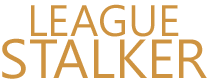
<style>
.page{position:relative;width:208px;height:84px;background:#ffffff}
.page>*{position:absolute;margin:0}
.t1{font:44px "SegoeUI";color:#ce9340;text-transform:uppercase}
.t2{font:55px "SegoeUI";color:#ce9340;text-transform:uppercase}
</style>
<div class="page">
<p class="t1" style="left:31px;top:4px;width:148px;height:33px">LEAGUE</p>
<p class="t2" style="left:2px;top:38px;width:205px;height:41px">STALKER</p>
</div>
